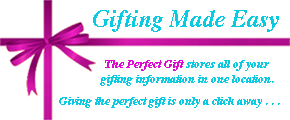
<style>
.page{position:relative;width:290px;height:120px;background:#ffffff}
.page>*{position:absolute;margin:0}
.t1{font:24px "Times-BoldItalic";color:#0acae1}
.t2{font:12px "Times-BoldItalic";color:#0acae1}
.t3{font:12px "Times-BoldItalic";color:#dd0ad1}
</style>
<div class="page">
<p class="t1" style="left:93px;top:10px;width:186px;height:22px">Gifting Made Easy</p>
<p class="t2" style="left:100px;top:60px;width:174px;height:26px;text-align:center"><span class="t3">The Perfect Gift </span>stores all of your<br>gifting information in one location.</p>
<p class="t2" style="left:59px;top:97px;width:221px;height:11px">Giving the perfect gift is only a click away . . .</p>
</div>
